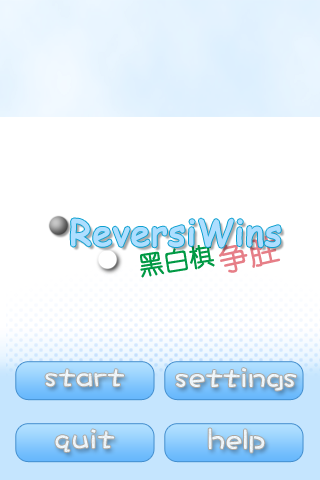
<style>
.page{position:relative;width:320px;height:480px;background:#ffffff}
.page>*{position:absolute;margin:0}
.t1{font:35.1px "ComicSansMS";color:#aedeff;font-weight:bold}
.t2{font:24.8px "YouYuan";color:#009944;font-weight:bold}
.t3{font:30px "YouYuan";color:#e67e87;font-weight:bold}
.t4{font:30px "DFCraftYu-W5-WING-RKSJ-H";color:#eef4f9;font-weight:bold}
.t5{font:30px "DFCraftYu-W5-WING-RKSJ-H";color:#eff5fa;font-weight:bold}
.t6{font:30px "DFCraftYu-W5-WING-RKSJ-H";color:#edf4f8;font-weight:bold}
</style>
<div class="page">
<p class="t1" style="left:70px;top:218px;width:211px;height:30px">ReversiWins</p>
<p class="t2" style="left:140px;top:243px;width:75px;height:35px;rotate:-9deg">黑白棋</p>
<p class="t3" style="left:219px;top:235px;width:62px;height:38px;rotate:-12deg">争胜</p>
<p class="t4" style="left:45px;top:369px;width:79px;height:18px">start</p>
<p class="t5" style="left:176px;top:368px;width:121px;height:23px">settings</p>
<p class="t6" style="left:55px;top:429px;width:60px;height:23px">quit</p>
<p class="t4" style="left:208px;top:428px;width:57px;height:25px">help</p>
</div>
